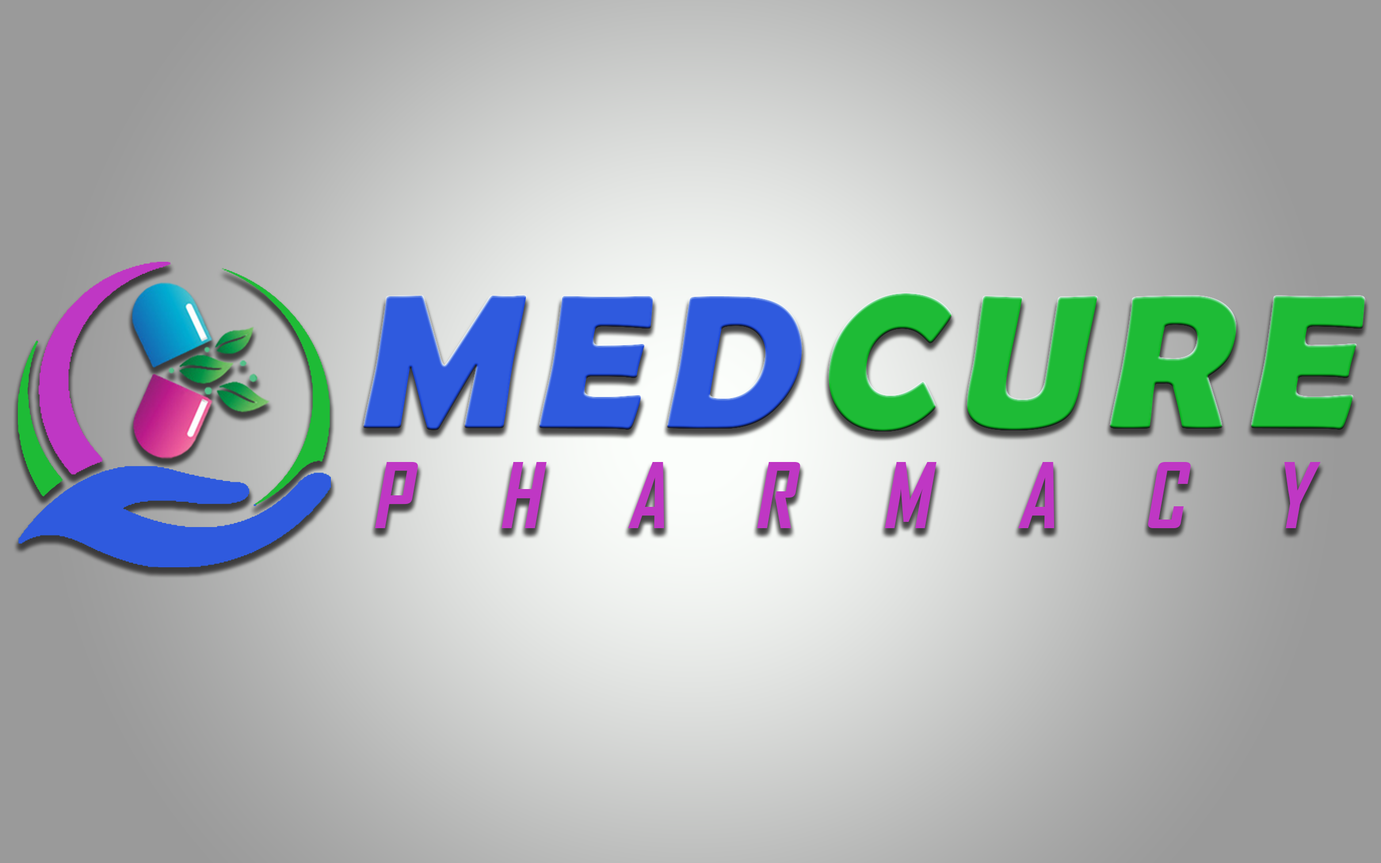
<style>
.page{position:relative;width:1381px;height:863px}
.page>*{position:absolute;margin:0}
.t1{font:191.8px "BerlinSansFBDemi-Bold";letter-spacing:0.1em;color:#1ebb36;font-style:italic}
.t2{font:191.8px "BerlinSansFBDemi-Bold";letter-spacing:0.1em;color:#2f5ade;font-style:italic}
.t3{font:86.3px "AgencyFB-Bold";letter-spacing:0.1em;color:#bf37c4;font-style:italic}
</style>
<div class="page">
<p class="t1" style="left:829px;top:294px;width:536px;height:137px">CURE</p>
<p class="t2" style="left:364px;top:295px;width:438px;height:135px">MED</p>
<p class="t3" style="left:375px;top:462px;width:946px;height:66px">P   H   A   R   M   A   C   Y</p>
</div>
